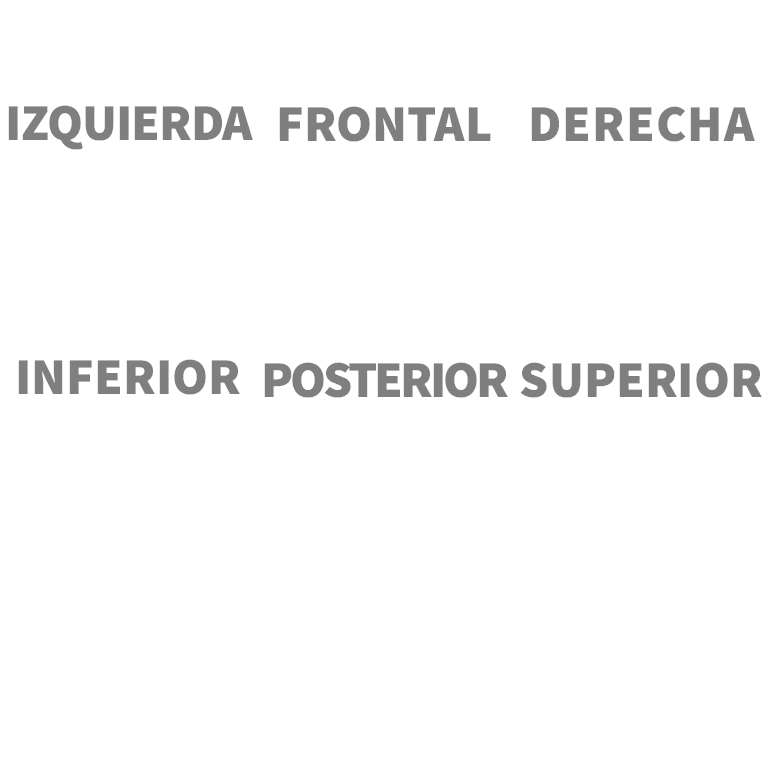
<style>
.page{position:relative;width:768px;height:768px;background:#ffffff}
.page>*{position:absolute;margin:0}
.t1{font:52px "SourceSansPro-Black";letter-spacing:-0.02em;color:#7f7f7f}
.t2{font:52px "SourceSansPro-Black";color:#7f7f7f}
.t3{font:52px "SourceSansPro-Black";letter-spacing:0.02em;color:#7f7f7f}
.t4{font:52px "SourceSansPro-Black";letter-spacing:-0.06em;color:#7f7f7f}
</style>
<div class="page">
<p class="t1" style="left:8px;top:105px;width:245px;height:45px">IZQUIERDA</p>
<p class="t2" style="left:279px;top:106px;width:212px;height:36px">FRONTAL</p>
<p class="t3" style="left:531px;top:106px;width:224px;height:36px">DERECHA</p>
<p class="t2" style="left:18px;top:359px;width:222px;height:36px">INFERIOR</p>
<p class="t4" style="left:264px;top:362px;width:244px;height:36px">POSTERIOR</p>
<p class="t2" style="left:520px;top:362px;width:242px;height:36px">SUPERIOR</p>
</div>
